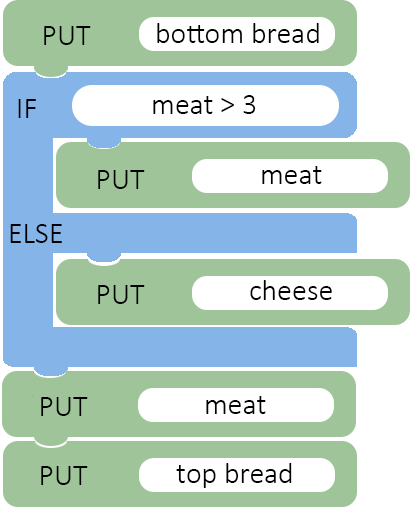
<style>
.page{position:relative;width:410px;height:507px;background:#a0c49a}
.page>*{position:absolute;margin:0}
.t1{font:30px "Calibri-Light";color:#000000}
</style>
<div class="page">
<p class="t1" style="left:44px;top:26px;width:47px;height:19px">PUT</p>
<p class="t1" style="left:157px;top:23px;width:162px;height:20px">bottom bread</p>
<p class="t1" style="left:18px;top:99px;width:18px;height:19px">IF</p>
<p class="t1" style="left:153px;top:95px;width:103px;height:19px">meat &gt; 3</p>
<p class="t1" style="left:98px;top:170px;width:47px;height:19px">PUT</p>
<p class="t1" style="left:262px;top:166px;width:60px;height:18px">meat</p>
<p class="t1" style="left:10px;top:224px;width:52px;height:19px">ELSE</p>
<p class="t1" style="left:250px;top:280px;width:82px;height:20px">cheese</p>
<p class="t1" style="left:98px;top:285px;width:47px;height:19px">PUT</p>
<p class="t1" style="left:41px;top:397px;width:47px;height:19px">PUT</p>
<p class="t1" style="left:206px;top:396px;width:60px;height:18px">meat</p>
<p class="t1" style="left:41px;top:466px;width:47px;height:19px">PUT</p>
<p class="t1" style="left:176px;top:463px;width:116px;height:25px">top bread</p>
</div>
